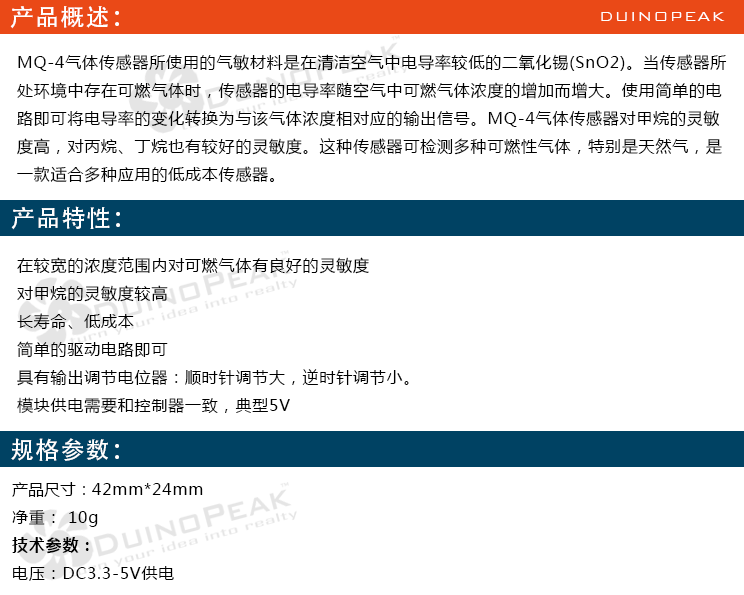
<style>
.page{position:relative;width:744px;height:595px;background:#ffffff}
.page>*{position:absolute;margin:0}
.t1{font:24px "AdobeHeitiStd-Regular";letter-spacing:0.05em;color:#ffffff}
.t2{font:18px "BankGothicBT-Light";letter-spacing:0.05em;color:#ffffff}
.t3{font:16px "MicrosoftYaHei";letter-spacing:0.05em;color:#000000}
.t4{font:16px "MicrosoftYaHei";color:#000000}
.t5{font:16px "MicrosoftYaHei-Bold";letter-spacing:0.05em;color:#000000}
</style>
<div class="page">
<p class="t1" style="left:10px;top:6px;width:109px;height:23px">产品概述：</p>
<p class="t2" style="left:601px;top:12px;width:124px;height:9px">DUINOPEAK</p>
<p class="t3" style="left:17px;top:54px;width:710px;height:129px">MQ-4气体传感器所使用的气敏材料是在清洁空气中电导率较低的二氧化锡(SnO2)。当传感器所<br>处环境中存在可燃气体时，传感器的电导率随空气中可燃气体浓度的增加而增大。使用简单的电<br>路即可将电导率的变化转换为与该气体浓度相对应的输出信号。MQ-4气体传感器对甲烷的灵敏<br>度高，对丙烷、丁烷也有较好的灵敏度。这种传感器可检测多种可燃性气体，特别是天然气，是<br>一款适合多种应用的低成本传感器。</p>
<p class="t1" style="left:11px;top:206px;width:109px;height:24px">产品特性：</p>
<p class="t3" style="left:17px;top:257px;width:392px;height:157px">在较宽的浓度范围内对可燃气体有良好的灵敏度<br>对甲烷的灵敏度较高<br>长寿命、低成本<br>简单的驱动电路即可<br>具有输出调节电位器：顺时针调节大，逆时针调节小。<br>模块供电需要和控制器一致，典型5V</p>
<p class="t1" style="left:11px;top:438px;width:108px;height:23px">规格参数：</p>
<p class="t3" style="left:12px;top:482px;width:191px;height:99px"><span class="t4">产品尺寸：</span>42mm*24mm<br>净重： 10g<br><span class="t5">技术参数：<br></span>电压：DC3.3-5V供电</p>
</div>
